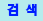
<style>
.page{position:relative;width:43px;height:21px;background:#b6eced}
.page>*{position:absolute;margin:0}
.t1{font:12.5px "HeadlineR-HM";color:#001eff}
</style>
<div class="page">
<p class="t1" style="left:7px;top:3px;width:30px;height:13px">검 색</p>
</div>
